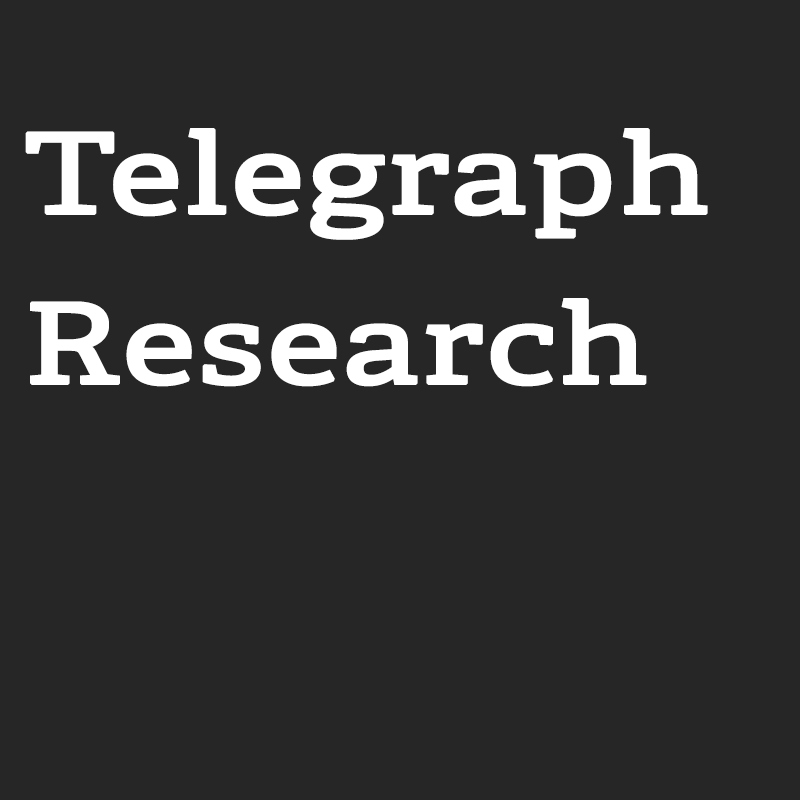
<style>
.page{position:relative;width:800px;height:800px;background:#262626}
.page>*{position:absolute;margin:0}
.t1{font:110.5px "Adelle-Regular";color:#ffffff;font-weight:bold;scale:1.28 1}
</style>
<div class="page">
<p class="t1" style="left:25px;top:128px;width:683px;height:259px">Telegraph Research</p>
</div>
